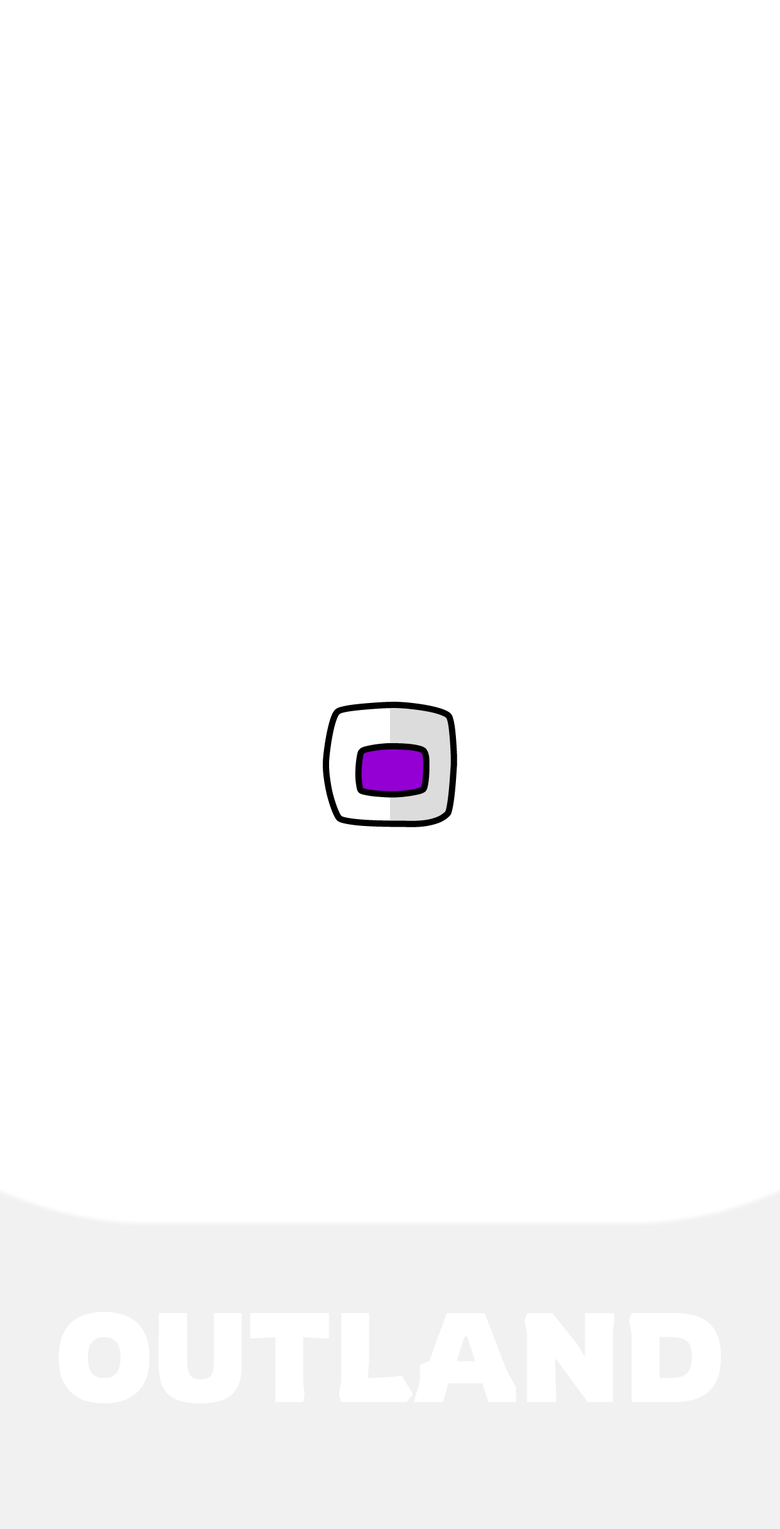
<style>
.page{position:relative;width:780px;height:1529px;background:#ffffff}
.page>*{position:absolute;margin:0}
.t1{font:156.9px "Slackey-Regular"}
.t2{font:125.6px "Rowdies-Bold";color:#ffffff}
</style>
<div class="page">
<p class="t1" style="left:326px;top:705px;width:128px;height:119px">O</p>
<p class="t2" style="left:58px;top:1312px;width:663px;height:92px">OUTLAND</p>
</div>
